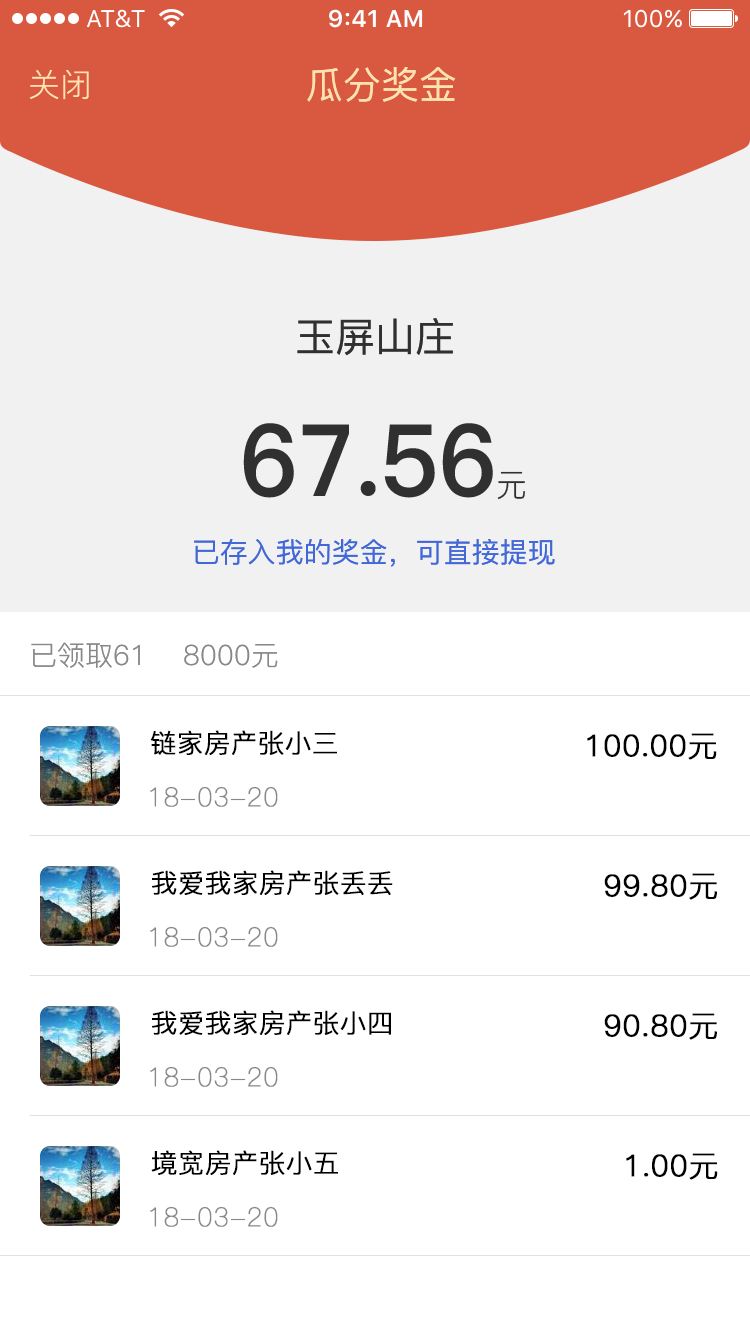
<style>
.page{position:relative;width:750px;height:1334px;background:#ffffff}
.page>*{position:absolute;margin:0}
.t1{font:32px "PingFang-SC-Regular";color:#ffe2b1}
.t2{font:38px "PingFang-SC-Medium";color:#ffe2b1}
.t3{font:40px "PingFang-SC-Medium";color:#303030}
.t4{font:100px "PingFang-SC-Heavy";color:#303030;scale:0.96 1}
.t5{font:32px "PingFang-SC-Regular";color:#303030;scale:0.96 1}
.t6{font:28px "PingFang-SC-Medium";color:#4268d7}
.t7{font:28px "PingFang-SC-Regular";color:#888888}
.t8{font:26px "PingFang-SC-Regular";color:#000000;font-weight:bold}
.t9{font:30px "PingFang-SC-Regular";color:#010101;font-weight:bold}
.t10{font:26px "PingFang-SC-ExtraLight";color:#888888;font-weight:bold}
</style>
<div class="page">
<p class="t1" style="left:29px;top:69px;width:60px;height:31px">关闭</p>
<p class="t2" style="left:307px;top:67px;width:149px;height:35px">瓜分奖金</p>
<p class="t3" style="left:297px;top:318px;width:156px;height:38px">玉屏山庄</p>
<p class="t4" style="left:243px;top:423px;width:282px;height:77px">67.56<span class="t5">元</span></p>
<p class="t6" style="left:194px;top:539px;width:361px;height:28px">已存入我的奖金，可直接提现</p>
<p class="t7" style="left:31px;top:642px;width:247px;height:26px">已领取61    8000元</p>
<p class="t8" style="left:150px;top:730px;width:187px;height:25px">链家房产张小三</p>
<p class="t9" style="left:587px;top:733px;width:130px;height:27px">100.00元</p>
<p class="t10" style="left:150px;top:786px;width:128px;height:21px">18-03-20</p>
<p class="t8" style="left:152px;top:870px;width:241px;height:25px">我爱我家房产张丢丢</p>
<p class="t9" style="left:604px;top:873px;width:113px;height:27px">99.80元</p>
<p class="t10" style="left:150px;top:926px;width:128px;height:21px">18-03-20</p>
<p class="t8" style="left:152px;top:1010px;width:239px;height:25px">我爱我家房产张小四</p>
<p class="t9" style="left:604px;top:1013px;width:113px;height:27px">90.80元</p>
<p class="t10" style="left:150px;top:1066px;width:128px;height:21px">18-03-20</p>
<p class="t8" style="left:151px;top:1150px;width:187px;height:25px">境宽房产张小五</p>
<p class="t9" style="left:626px;top:1153px;width:92px;height:27px">1.00元</p>
<p class="t10" style="left:150px;top:1206px;width:128px;height:21px">18-03-20</p>
</div>
